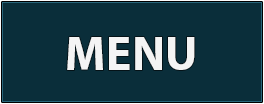
<style>
.page{position:relative;width:264px;height:104px;background:#0a2e3a}
.page>*{position:absolute;margin:0}
.t1{font:48px "MyriadHebrew-Bold";color:#f4f4f4}
</style>
<div class="page">
<p class="t1" style="left:67px;top:37px;width:128px;height:33px">MENU</p>
</div>
